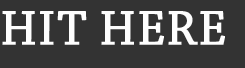
<style>
.page{position:relative;width:245px;height:68px;background:#333333}
.page>*{position:absolute;margin:0}
.t1{font:50px "ChaparralPro-Regular";color:#fefefe;font-weight:bold}
</style>
<div class="page">
<p class="t1" style="left:2px;top:11px;width:223px;height:34px">HIT HERE</p>
</div>
